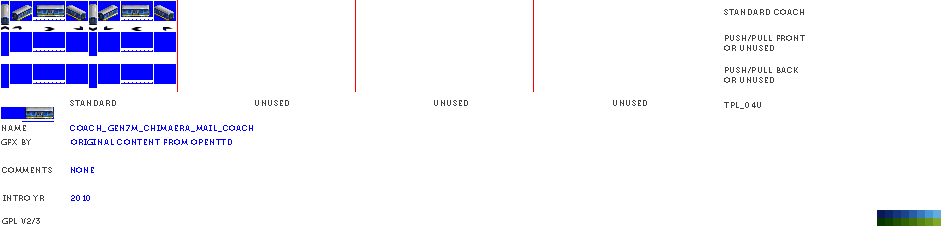
<style>
.page{position:relative;width:950px;height:230px;background:#ffffff}
.page>*{position:absolute;margin:0}
.t1{font:8px "Museo700-Regular";letter-spacing:0.075em;color:#404040;text-transform:uppercase}
.t2{font:8px "Museo700-Regular";letter-spacing:0.075em;color:#0000ff;text-transform:uppercase}
</style>
<div class="page">
<p class="t1" style="left:724px;top:9px;width:80px;height:6px">standard coach</p>
<p class="t1" style="left:724px;top:35px;width:81px;height:16px">push/pull front<br>or unused</p>
<p class="t1" style="left:724px;top:67px;width:74px;height:16px">push/pull back<br>or unused</p>
<p class="t1" style="left:70px;top:100px;width:46px;height:6px">standard</p>
<p class="t1" style="left:255px;top:100px;width:34px;height:6px">unused</p>
<p class="t1" style="left:434px;top:100px;width:34px;height:6px">unused</p>
<p class="t1" style="left:613px;top:100px;width:34px;height:6px">unused</p>
<p class="t1" style="left:724px;top:102px;width:37px;height:7px">tpl_04u</p>
<p class="t1" style="left:2px;top:125px;width:24px;height:6px">name</p>
<p class="t2" style="left:70px;top:125px;width:183px;height:7px">coach_Gen7M_Chimaera_Mail_Coach</p>
<p class="t1" style="left:1px;top:139px;width:30px;height:6px">gfx by</p>
<p class="t2" style="left:71px;top:139px;width:161px;height:6px">original content from openttd</p>
<p class="t1" style="left:2px;top:167px;width:50px;height:6px">comments</p>
<p class="t2" style="left:71px;top:167px;width:23px;height:6px">none</p>
<p class="t1" style="left:3px;top:195px;width:41px;height:6px">intro yr</p>
<p class="t2" style="left:71px;top:195px;width:19px;height:6px">2010</p>
<p class="t1" style="left:2px;top:218px;width:38px;height:6px">gpl v2/3</p>
</div>
